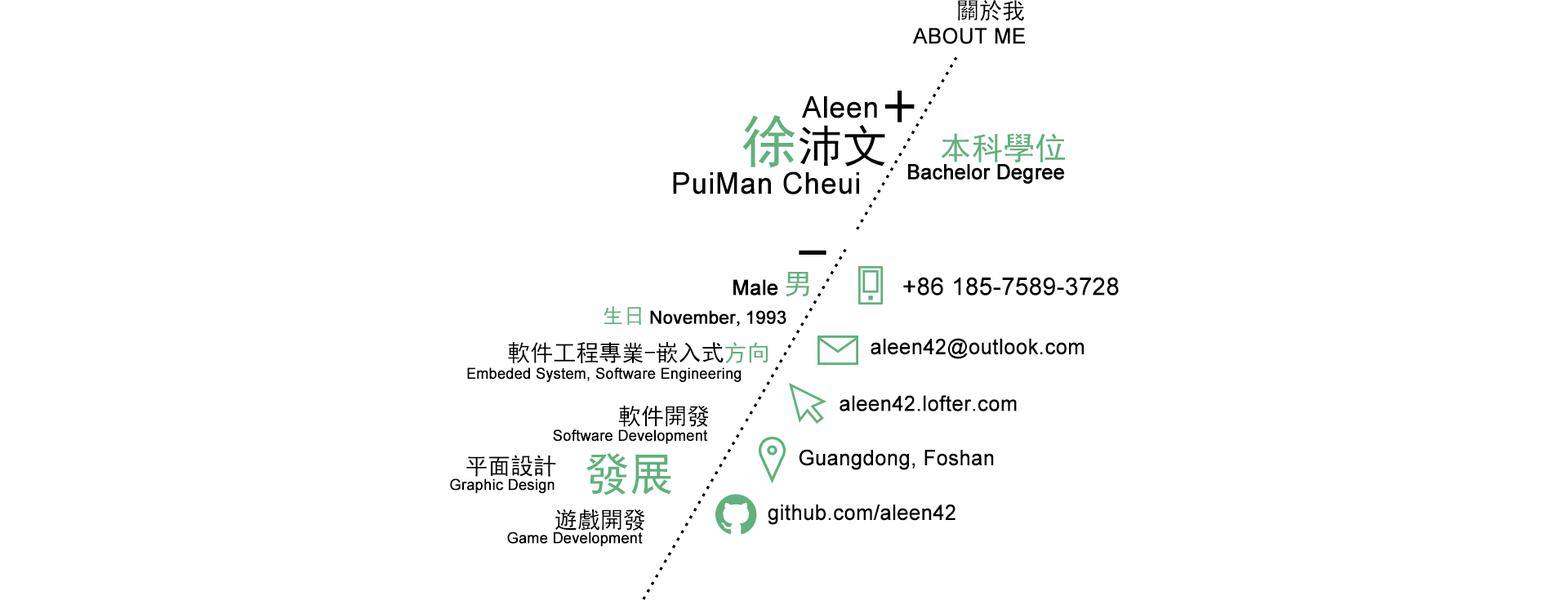
<style>
.page{position:relative;width:1568px;height:600px;background:#ffffff}
.page>*{position:absolute;margin:0}
.t1{font:22.8px "SimHei";color:#000000}
.t2{font:21.6px "ArialMT";color:#000000;font-weight:bold;scale:0.96 1}
.t3{font:29.9px "ArialMT";color:#000000;font-weight:bold;scale:0.96 1}
.t4{font:71px "SimHei";color:#000000;scale:0.91 1}
.t5{font:45px "SimHei";color:#000000}
.t6{font:57.1px "SimHei";color:#60b17c}
.t7{font:31.5px "SimHei";color:#60b17c}
.t8{font:20.8px "ArialMT";color:#000000;font-weight:bold;scale:0.96 1}
.t9{font:67.6px "SimHei";color:#000000;scale:0.91 1}
.t10{font:21.1px "ArialMT";color:#000000;font-weight:bold;scale:0.96 1}
.t11{font:27.9px "SimHei";color:#60b17c}
.t12{font:24.5px "ArialMT";color:#000000;font-weight:bold;scale:0.97 1}
.t13{font:20.6px "SimHei";color:#60b17c}
.t14{font:18.2px "ArialMT";color:#000000;font-weight:bold}
.t15{font:18.2px "SimSun";color:#000000;font-weight:bold}
.t16{font:21.2px "ArialMT";color:#000000;font-weight:bold;scale:0.97 1}
.t17{font:22.8px "SimHei";color:#60b17c}
.t18{font:15.1px "ArialMT";color:#000000;font-weight:bold;scale:0.96 1}
.t19{font:44.9px "SimHei";color:#60b17c}
</style>
<div class="page">
<p class="t1" style="left:958px;top:0px;width:66px;height:21px">關於我</p>
<p class="t2" style="left:912px;top:28px;width:113px;height:16px">ABOUT ME</p>
<p class="t3" style="left:802px;top:96px;width:75px;height:22px">Aleen</p>
<p class="t4" style="left:884px;top:91px;width:31px;height:31px">+</p>
<p class="t5" style="left:742px;top:115px;width:143px;height:52px"><span class="t6">徐</span>沛文</p>
<p class="t7" style="left:941px;top:133px;width:124px;height:30px">本科學位</p>
<p class="t3" style="left:673px;top:172px;width:186px;height:22px">PuiMan Cheui</p>
<p class="t8" style="left:908px;top:164px;width:156px;height:20px">Bachelor Degree</p>
<p class="t9" style="left:799px;top:250px;width:27px;height:5px">-</p>
<p class="t10" style="left:733px;top:279px;width:45px;height:17px">Male</p>
<p class="t11" style="left:786px;top:272px;width:23px;height:25px">男</p>
<p class="t12" style="left:903px;top:277px;width:216px;height:19px">+86 185-7589-3728</p>
<p class="t13" style="left:604px;top:306px;width:37px;height:20px">生日</p>
<p class="t14" style="left:650px;top:310px;width:136px;height:17px">November<span class="t15">,</span>1993</p>
<p class="t16" style="left:871px;top:338px;width:213px;height:21px">aleen42@outlook.com</p>
<p class="t1" style="left:508px;top:342px;width:260px;height:21px">軟件工程專業-嵌入式<span class="t17">方向</span></p>
<p class="t18" style="left:467px;top:368px;width:275px;height:14px">Embeded System, Software Engineering</p>
<p class="t16" style="left:840px;top:395px;width:177px;height:17px">aleen42.lofter.com</p>
<p class="t1" style="left:619px;top:405px;width:90px;height:22px">軟件開發</p>
<p class="t18" style="left:553px;top:430px;width:155px;height:14px">Software Development</p>
<p class="t16" style="left:799px;top:449px;width:195px;height:21px">Guangdong, Foshan</p>
<p class="t1" style="left:466px;top:455px;width:90px;height:22px">平面設計</p>
<p class="t19" style="left:586px;top:453px;width:86px;height:43px">發展</p>
<p class="t18" style="left:450px;top:479px;width:105px;height:15px">Graphic Design</p>
<p class="t1" style="left:555px;top:509px;width:90px;height:22px">遊戲開發</p>
<p class="t16" style="left:768px;top:505px;width:188px;height:20px">github.com/aleen42</p>
<p class="t18" style="left:507px;top:532px;width:136px;height:15px">Game Development</p>
</div>
